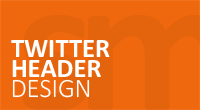
<style>
.page{position:relative;width:200px;height:110px;background:#f0680e}
.page>*{position:absolute;margin:0}
.t1{font:26.6px/20.8px "Calibri-Bold";color:#ffffff}
.t2{font:26.6px "Calibri-Light";color:#ffffff}
</style>
<div class="page">
<p class="t1" style="left:11px;top:40px;width:99px;height:37px">TWITTER<br>HEADER</p>
<p class="t2" style="left:12px;top:79px;width:78px;height:19px">DESIGN</p>
</div>
